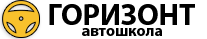
<style>
.page{position:relative;width:207px;height:39px;background:#ffffff}
.page>*{position:absolute;margin:0}
.t1{font:30px "MyriadPro-Bold";color:#000000}
.t2{font:16px "MyriadPro-Bold";color:#000000}
</style>
<div class="page">
<p class="t1" style="left:49px;top:4px;width:146px;height:21px">ГОРИЗОНТ</p>
<p class="t2" style="left:82px;top:28px;width:80px;height:8px">автошкола</p>
</div>
